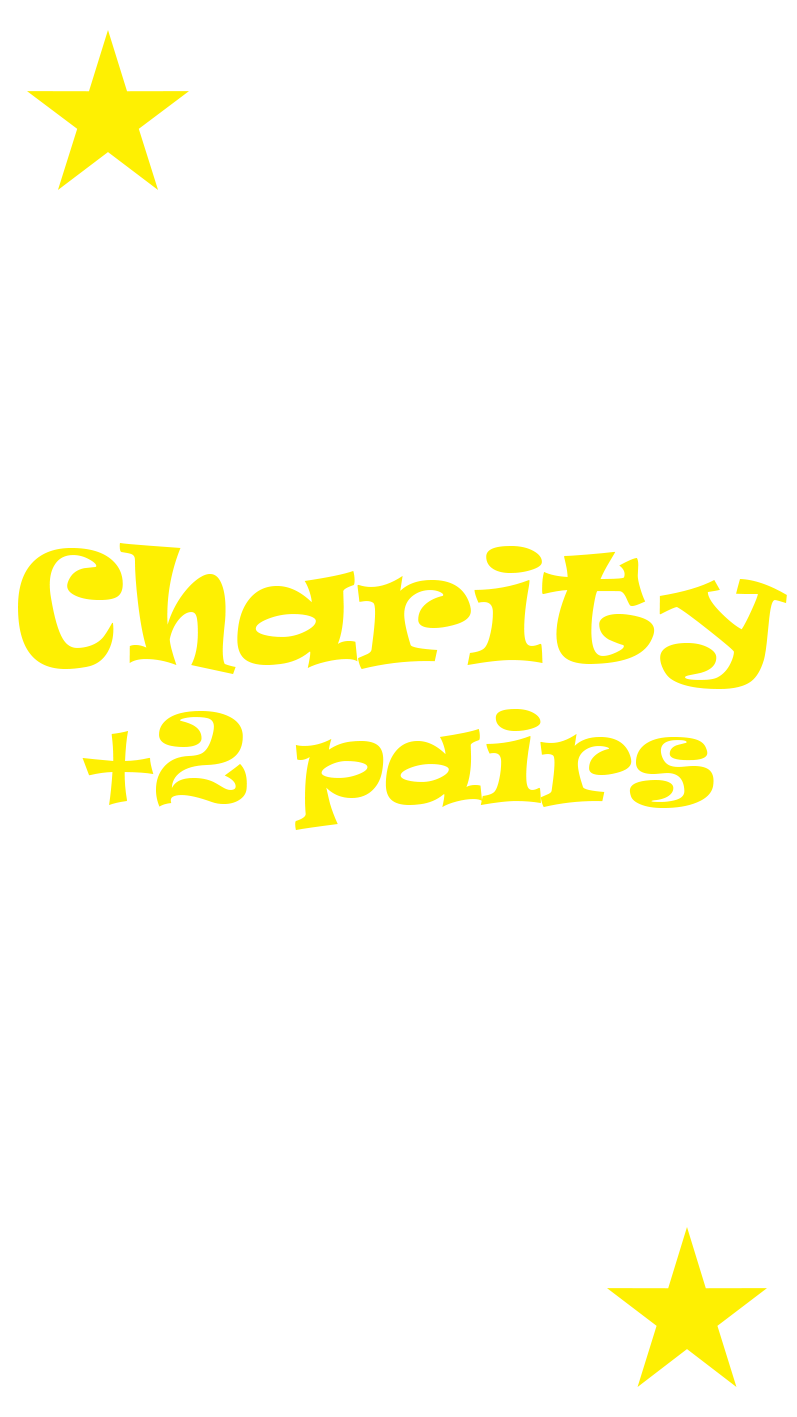
<style>
.page{position:relative;width:797px;height:1417px;background:#ffffff}
.page>*{position:absolute;margin:0}
.t1{font:116.7px "Ravie";color:#fef002}
.t2{font:145.8px "Ravie";color:#fef002}
</style>
<div class="page">
<p class="t1" style="left:18px;top:543px;width:769px;height:287px;text-align:center"><span class="t2">Charity<br></span>+2 pairs</p>
</div>
